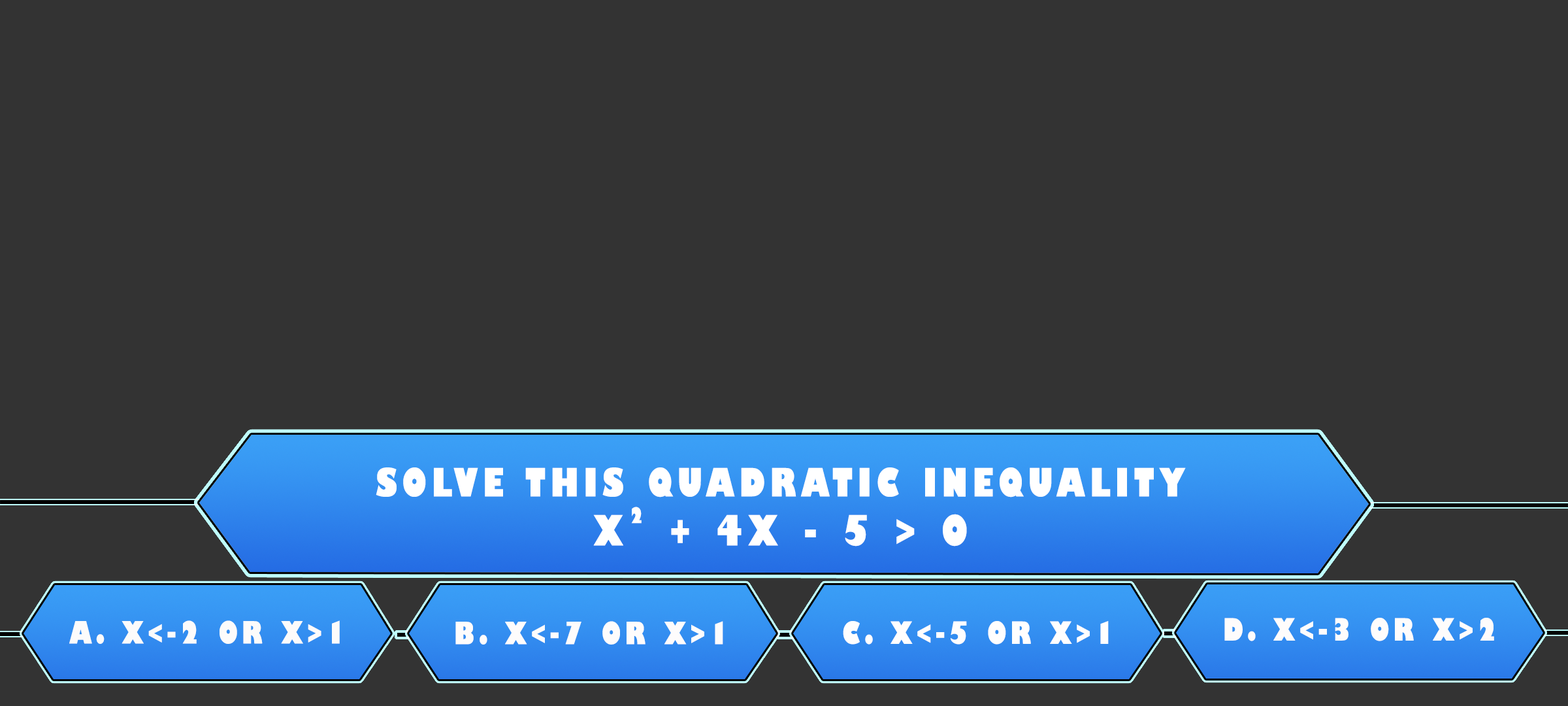
<style>
.page{position:relative;width:1568px;height:706px;background:#333333}
.page>*{position:absolute;margin:0}
.t1{font:38.1px/49px "GillSans-UltraBoldCondensed";letter-spacing:0.115em;color:#ffffff;text-transform:uppercase;scale:1.12 1}
.t2{font:40.8px/49px "GillSans-UltraBoldCondensed";letter-spacing:0.115em;color:#ffffff;text-transform:uppercase;scale:1.12 1}
.t3{font:21.1px "GillSans-UltraBoldCondensed";letter-spacing:0.115em;color:#ffffff;text-transform:uppercase;scale:1.11 1}
.t4{font:29.9px "GillSans-UltraBoldCondensed";letter-spacing:0.115em;color:#fefcfc;text-transform:uppercase;scale:1.12 1}
.t5{font:29.9px "GillSans-UltraBoldCondensed";letter-spacing:0.115em;color:#fcfbfb;text-transform:uppercase;scale:1.12 1}
.t6{font:29.9px "GillSans-UltraBoldCondensed";letter-spacing:0.115em;color:#fffefe;text-transform:uppercase;scale:1.12 1}
</style>
<div class="page">
<p class="t1" style="left:376px;top:467px;width:810px;height:79px;text-align:center">solve this quadratic inequality<br><span class="t2">x  + 4x - 5 &gt; 0</span></p>
<p class="t3" style="left:631px;top:506px;width:11px;height:17px">2</p>
<p class="t4" style="left:1224px;top:617px;width:270px;height:24px">d. x&lt;-3 or x&gt;2</p>
<p class="t5" style="left:69px;top:620px;width:271px;height:24px">a. x&lt;-2 or x&gt;1</p>
<p class="t4" style="left:455px;top:621px;width:268px;height:23px">b. x&lt;-7 or x&gt;1</p>
<p class="t6" style="left:843px;top:621px;width:266px;height:23px">c. x&lt;-5 or x&gt;1</p>
</div>
